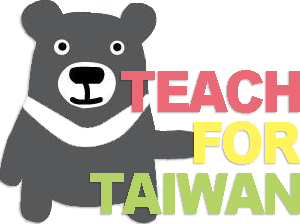
<style>
.page{position:relative;width:300px;height:224px;background:#ffffff}
.page>*{position:absolute;margin:0}
.t1{font:57.4px "Arial-Black";letter-spacing:-0.05em;color:#eb6877;scale:0.89 1}
.t2{font:57.4px "Arial-Black";letter-spacing:-0.05em;color:#fff45c;scale:0.89 1}
.t3{font:57.4px "Arial-Black";letter-spacing:-0.05em;color:#b3d465;scale:0.89 1}
</style>
<div class="page">
<p class="t1" style="left:121px;top:70px;width:179px;height:43px">TEACH</p>
<p class="t2" style="left:194px;top:121px;width:107px;height:43px">FOR</p>
<p class="t3" style="left:90px;top:173px;width:210px;height:41px">TAIWAN</p>
</div>
